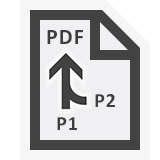
<style>
.page{position:relative;width:160px;height:160px;background:#f0eff1}
.page>*{position:absolute;margin:0}
.t1{font:22px "Calibri-Bold";letter-spacing:0.05em;color:#3e3e3e}
.t2{font:20px "Calibri-Bold";letter-spacing:0.05em;color:#3e3e3e}
</style>
<div class="page">
<p class="t1" style="left:47px;top:30px;width:36px;height:14px">PDF</p>
<p class="t2" style="left:95px;top:94px;width:20px;height:13px">P2</p>
<p class="t2" style="left:57px;top:117px;width:20px;height:13px">P1</p>
</div>
